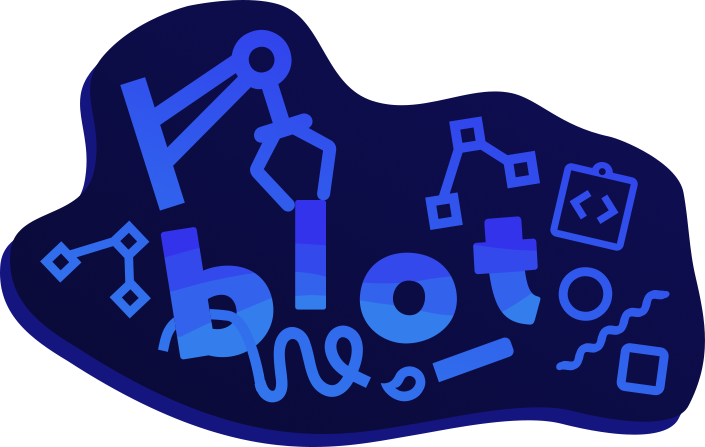
<style>
.page{position:relative;width:705px;height:447px;background:#ffffff}
.page>*{position:absolute;margin:0}
.t1{font:127.5px "YurukaStd-UB"}
.t2{font:150px "YurukaStd-UB"}
</style>
<div class="page">
<p class="t1" style="left:295px;top:200px;width:31px;height:110px">l</p>
<p class="t2" style="left:473px;top:216px;width:68px;height:109px;rotate:-7deg">t</p>
<p class="t2" style="left:160px;top:227px;width:114px;height:133px;rotate:-6deg">b</p>
<p class="t2" style="left:359px;top:252px;width:98px;height:92px;rotate:8deg">o</p>
</div>
